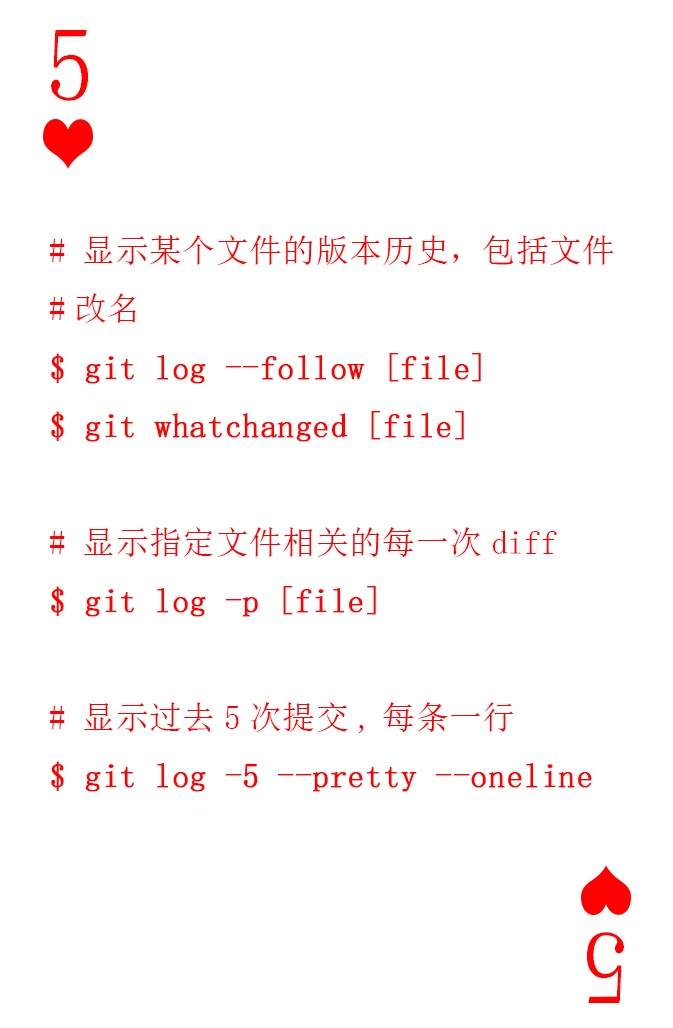
<style>
.page{position:relative;width:673px;height:1028px;background:#ffffff}
.page>*{position:absolute;margin:0}
.t1{font:104.2px "SimSun-ExtB";color:#ff0101;scale:0.93 1}
.t2{font:33.3px "SimSun";color:#ff0000;font-weight:bold}
.t3{font:33.3px "SimSun";color:#ff0000}
</style>
<div class="page">
<p class="t1" style="left:51px;top:30px;width:37px;height:71px">5</p>
<p class="t2" style="left:50px;top:235px;width:564px;height:557px"><span class="t3"># 显示某个文件的版本历史，包括文件<br>#改名<br></span>$ git log --follow [file]<br>$ git whatchanged [file]<br><span class="t3"><br># 显示指定文件相关的每一次diff<br></span>$ git log -p [file]<br><span class="t3"><br># 显示过去5次提交,每条一行<br></span>$ git log -5 --pretty --oneline</p>
<p class="t1" style="left:587px;top:932px;width:37px;height:71px;rotate:180deg">5</p>
</div>
